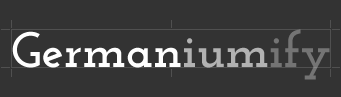
<style>
.page{position:relative;width:341px;height:97px;background:#333333}
.page>*{position:absolute;margin:0}
.t1{font:50px "JosefinSlab-Bold";color:#ffffff}
.t2{font:50px "JosefinSlab-Bold";color:#b2b2b2}
.t3{font:50px "JosefinSlab-Bold";color:#747474}
</style>
<div class="page">
<p class="t1" style="left:12px;top:29px;width:318px;height:51px">German<span class="t2">ium</span><span class="t3">ify</span></p>
</div>
